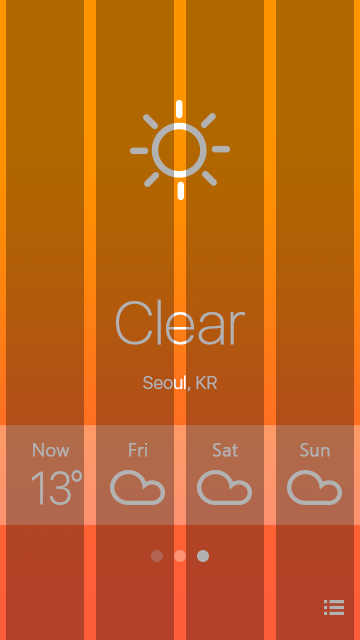
<style>
.page{position:relative;width:360px;height:640px}
.page>*{position:absolute;margin:0}
.t1{font:60px "SFUIDisplay-Thin";color:#b2b2b2;font-weight:bold}
.t2{font:18px "SFUIDisplay-Light";color:#b2b2b2;font-weight:bold}
.t3{font:18px "MalgunGothic-Semilight";color:#b2b2b2;font-weight:bold}
</style>
<div class="page">
<p class="t1" style="left:116px;top:299px;width:129px;height:46px">Clear</p>
<p class="t2" style="left:143px;top:375px;width:74px;height:17px">Seoul, KR</p>
<p class="t3" style="left:33px;top:443px;width:37px;height:14px">Now</p>
<p class="t3" style="left:129px;top:443px;width:18px;height:14px">Fri</p>
<p class="t3" style="left:213px;top:443px;width:25px;height:14px">Sat</p>
<p class="t3" style="left:300px;top:443px;width:30px;height:14px">Sun</p>
</div>
